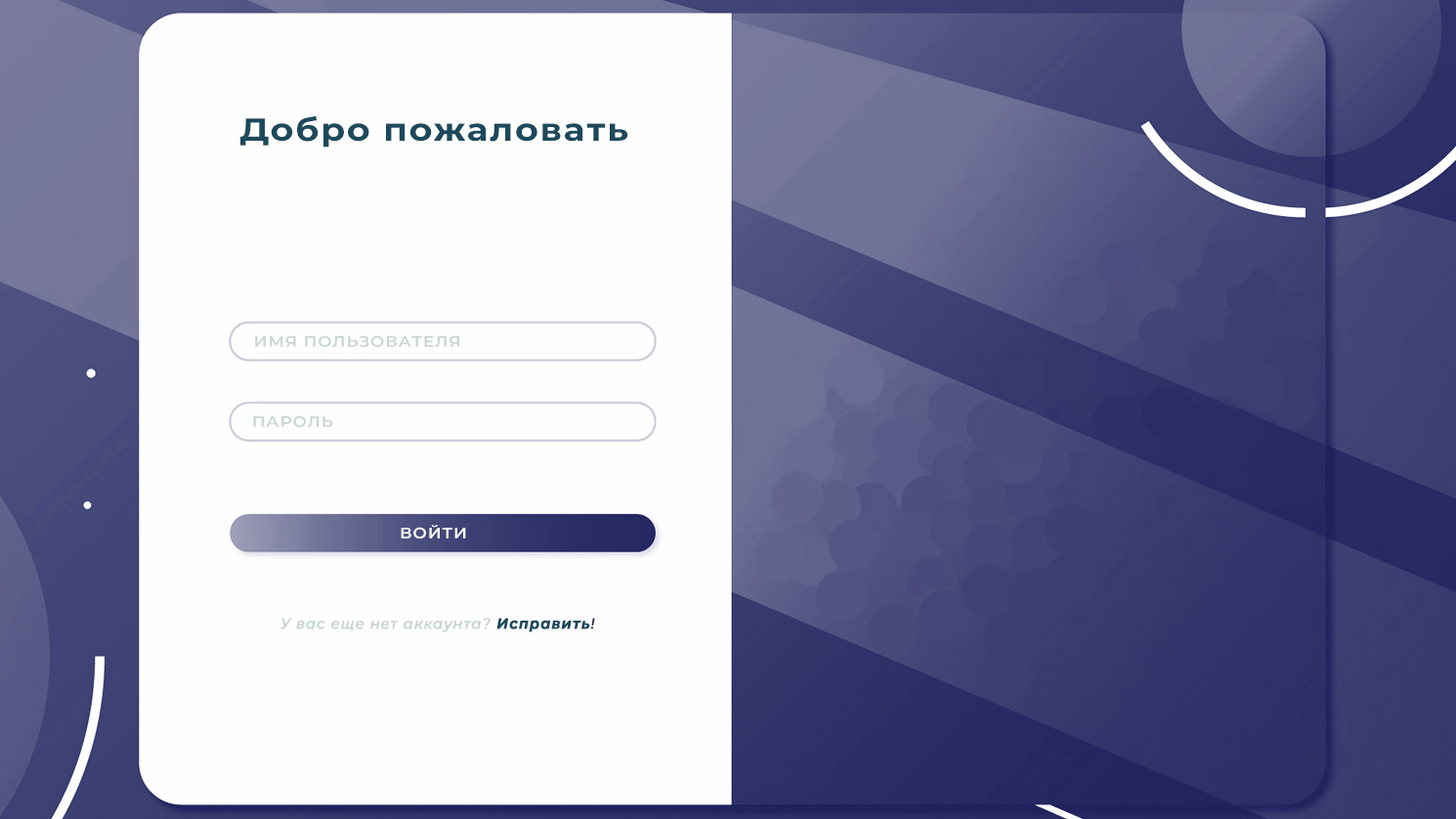
<style>
.page{position:relative;width:1456px;height:819px;background:#fefefe}
.page>*{position:absolute;margin:0}
.t1{font:31.7px "Montserrat-Bold";letter-spacing:0.05em;color:#1d495c;scale:1.11 1}
.t2{font:15px "Montserrat-SemiBold";letter-spacing:0.05em;color:#c8d6d0;scale:1.11 1}
.t3{font:15px "Montserrat-SemiBold";letter-spacing:0.05em;color:#ffffff;scale:1.11 1}
.t4{font:15px "Montserrat-MediumItalic";letter-spacing:0.05em;color:#c5d5cd;font-weight:bold;scale:0.94 1}
.t5{font:15px "Montserrat-BoldItalic";letter-spacing:0.05em;color:#1d495c;font-weight:bold;scale:0.94 1}
.t6{font:15px "Montserrat-MediumItalic";letter-spacing:0.05em;color:#381d5c;font-weight:bold;scale:0.94 1}
</style>
<div class="page">
<p class="t1" style="left:240px;top:115px;width:388px;height:33px">Добро пожаловать</p>
<p class="t2" style="left:255px;top:335px;width:204px;height:12px">ИМЯ ПОЛЬЗОВАТЕЛЯ</p>
<p class="t2" style="left:253px;top:415px;width:80px;height:12px">ПАРОЛЬ</p>
<p class="t3" style="left:401px;top:525px;width:65px;height:13px">ВОЙТИ</p>
<p class="t4" style="left:280px;top:618px;width:315px;height:14px">У вас еще нет аккаунта? <span class="t5">Исправить</span><span class="t6">!</span></p>
</div>
